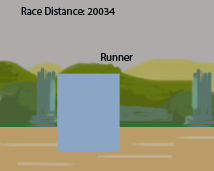
<style>
.page{position:relative;width:214px;height:171px;background:#acaba9}
.page>*{position:absolute;margin:0}
.t1{font:10.7px "MyriadPro-Regular";color:#090c10}
</style>
<div class="page">
<p class="t1" style="left:21px;top:7px;width:94px;height:8px">Race Distance: 20034</p>
<p class="t1" style="left:101px;top:53px;width:32px;height:8px">Runner</p>
</div>
